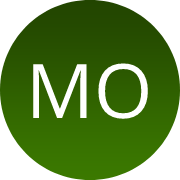
<style>
.page{position:relative;width:180px;height:180px;background:#ffffff}
.page>*{position:absolute;margin:0}
.t1{font:75.2px "OpenSans-Regular";color:#ffffff}
</style>
<div class="page">
<p class="t1" style="left:33px;top:63px;width:115px;height:56px">MO</p>
</div>
